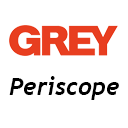
<style>
.page{position:relative;width:128px;height:128px;background:#ffffff}
.page>*{position:absolute;margin:0}
.t1{font:24px "Trebuchet-BoldItalic";color:#000000}
</style>
<div class="page">
<p class="t1" style="left:9px;top:76px;width:110px;height:24px">Periscope</p>
</div>
